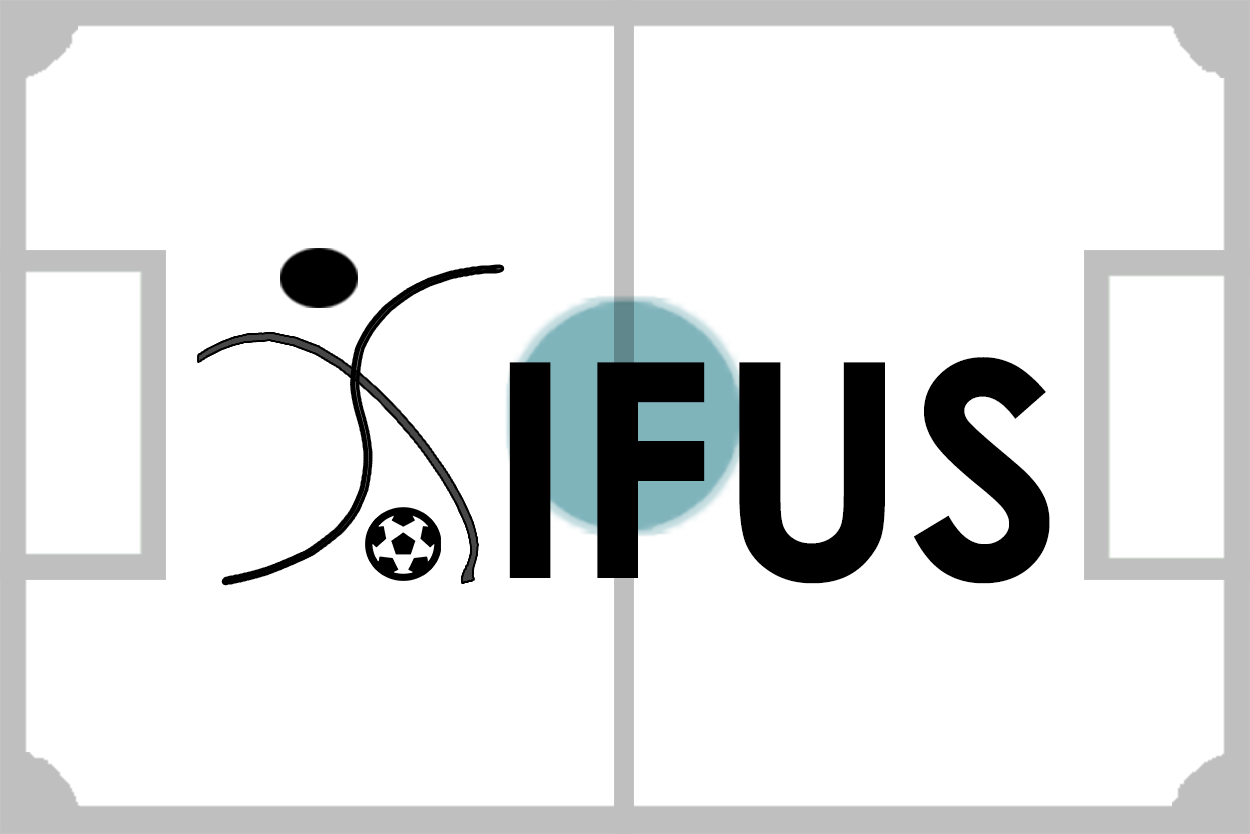
<style>
.page{position:relative;width:1250px;height:834px;background:#ffffff}
.page>*{position:absolute;margin:0}
.t1{font:300px "CenturyGothic-Bold";color:#000000}
</style>
<div class="page">
<p class="t1" style="left:509px;top:357px;width:541px;height:227px">IFUS</p>
</div>
